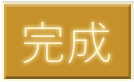
<style>
.page{position:relative;width:134px;height:82px;background:#c6912b}
.page>*{position:absolute;margin:0}
.t1{font:45.8px "YuGothicUI-Light";color:#fff5d3}
</style>
<div class="page">
<p class="t1" style="left:23px;top:22px;width:87px;height:41px">完成</p>
</div>
